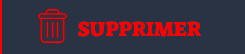
<style>
.page{position:relative;width:245px;height:54px;background:#2a3344}
.page>*{position:absolute;margin:0}
.t1{font:20.8px "SuezOne-Regular";color:#ff0000}
</style>
<div class="page">
<p class="t1" style="left:78px;top:21px;width:123px;height:16px">SUPPRIMER</p>
</div>
